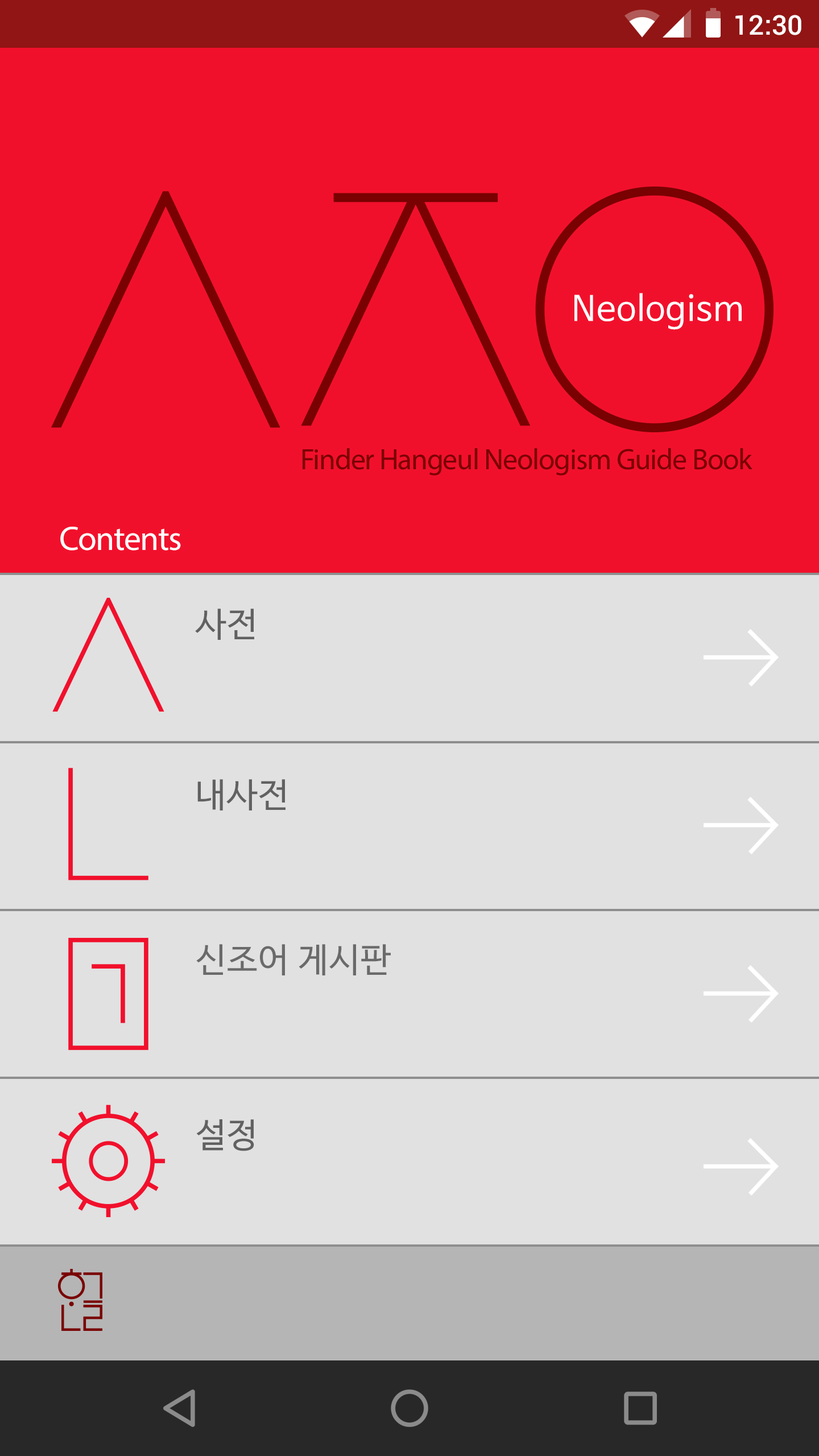
<style>
.page{position:relative;width:819px;height:1456px;background:#e1e1e1}
.page>*{position:absolute;margin:0}
.t1{font:27.3px "Roboto-Medium";color:#ffffff}
.t2{font:34.1px "NanumBarunGothic";letter-spacing:0.025em;color:#ffffff}
.t3{font:29.6px "MyriadPro-Regular";letter-spacing:-0.025em;color:#790101}
.t4{font:34.1px "MyriadPro-Regular";letter-spacing:-0.025em;color:#ffffff}
.t5{font:34.1px "NanumBarunGothic";letter-spacing:0.025em;color:#616161}
.t6{font:34.1px "NanumBarunGothic";letter-spacing:0.025em;color:#6a6a6a}
</style>
<div class="page">
<p class="t1" style="left:735px;top:15px;width:66px;height:20px">12:30</p>
<p class="t2" style="left:574px;top:293px;width:168px;height:37px">Neologism</p>
<p class="t3" style="left:303px;top:448px;width:449px;height:27px">Finder Hangeul Neologism Guide Book</p>
<p class="t4" style="left:60px;top:527px;width:121px;height:24px">Contents</p>
<p class="t5" style="left:195px;top:609px;width:59px;height:31px">사전</p>
<p class="t5" style="left:197px;top:779px;width:89px;height:31px">내사전</p>
<p class="t6" style="left:196px;top:944px;width:195px;height:31px">신조어 게시판</p>
<p class="t5" style="left:196px;top:1119px;width:58px;height:32px">설정</p>
</div>
